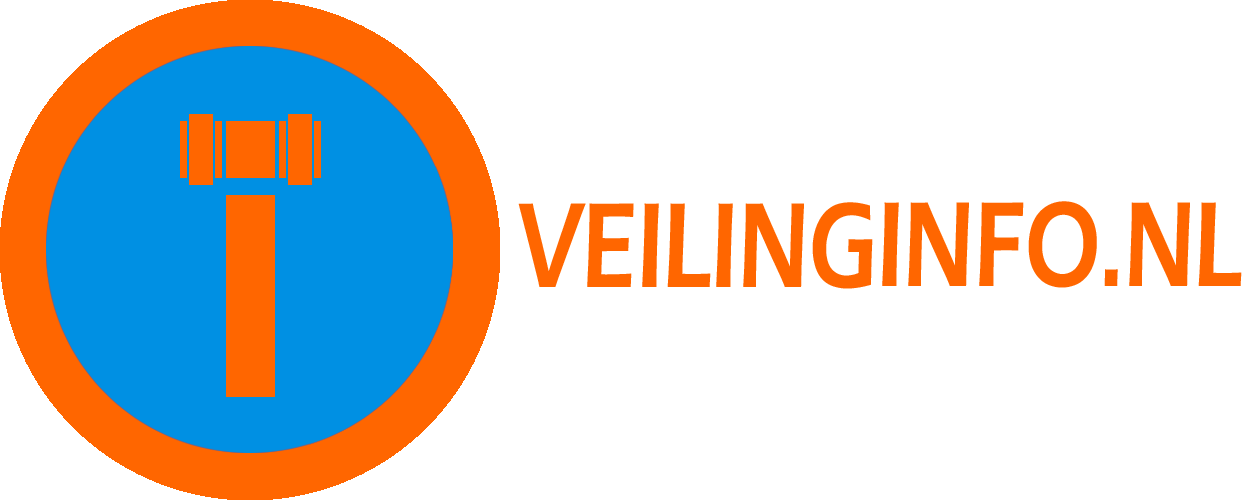
<style>
.page{position:relative;width:1260px;height:500px;background:#ffffff}
.page>*{position:absolute;margin:0}
.t1{font:124.6px "ErasITC-Demi";color:#ff6600;text-transform:uppercase;scale:0.72 1}
</style>
<div class="page">
<p class="t1" style="left:518px;top:201px;width:724px;height:88px">veilinginfo.nl</p>
</div>
